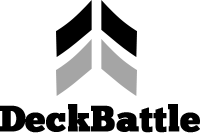
<style>
.page{position:relative;width:200px;height:133px;background:#ffffff}
.page>*{position:absolute;margin:0}
.t1{font:36px "ChunkFive";color:#000000;font-weight:bold}
</style>
<div class="page">
<p class="t1" style="left:0px;top:104px;width:200px;height:29px">DeckBattle</p>
</div>
